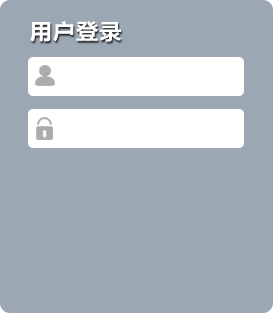
<style>
.page{position:relative;width:273px;height:313px;background:#9ba7b3}
.page>*{position:absolute;margin:0}
.t1{font:22.5px "FZLTCHK--GBK1-0";color:#ffffff}
</style>
<div class="page">
<p class="t1" style="left:30px;top:21px;width:91px;height:21px">用户登录</p>
</div>
